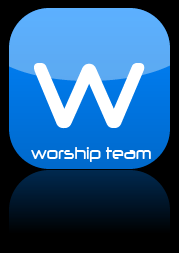
<style>
.page{position:relative;width:179px;height:253px;background:#000000}
.page>*{position:absolute;margin:0}
.t1{font:142px "Neuropol";color:#ffffff;scale:0.82 1}
.t2{font:20px "Neuropol";color:#ffffff;scale:0.82 1}
</style>
<div class="page">
<p class="t1" style="left:34px;top:63px;width:111px;height:66px">w</p>
<p class="t2" style="left:31px;top:147px;width:120px;height:15px">worship team</p>
</div>
